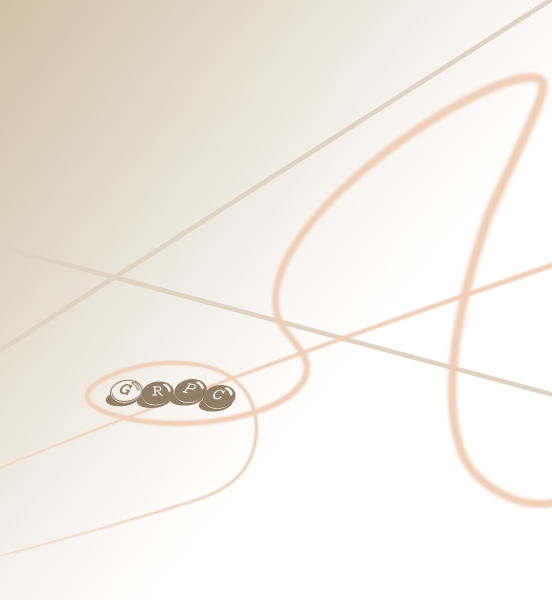
<style>
.page{position:relative;width:552px;height:600px;background:#ffffff}
.page>*{position:absolute;margin:0}
.t1{font:42.5px "CandyBitsBT-Regular";letter-spacing:-0.05em;color:#937f65}
</style>
<div class="page">
<p class="t1" style="left:105px;top:379px;width:131px;height:33px;rotate:3deg">gRPC</p>
</div>
